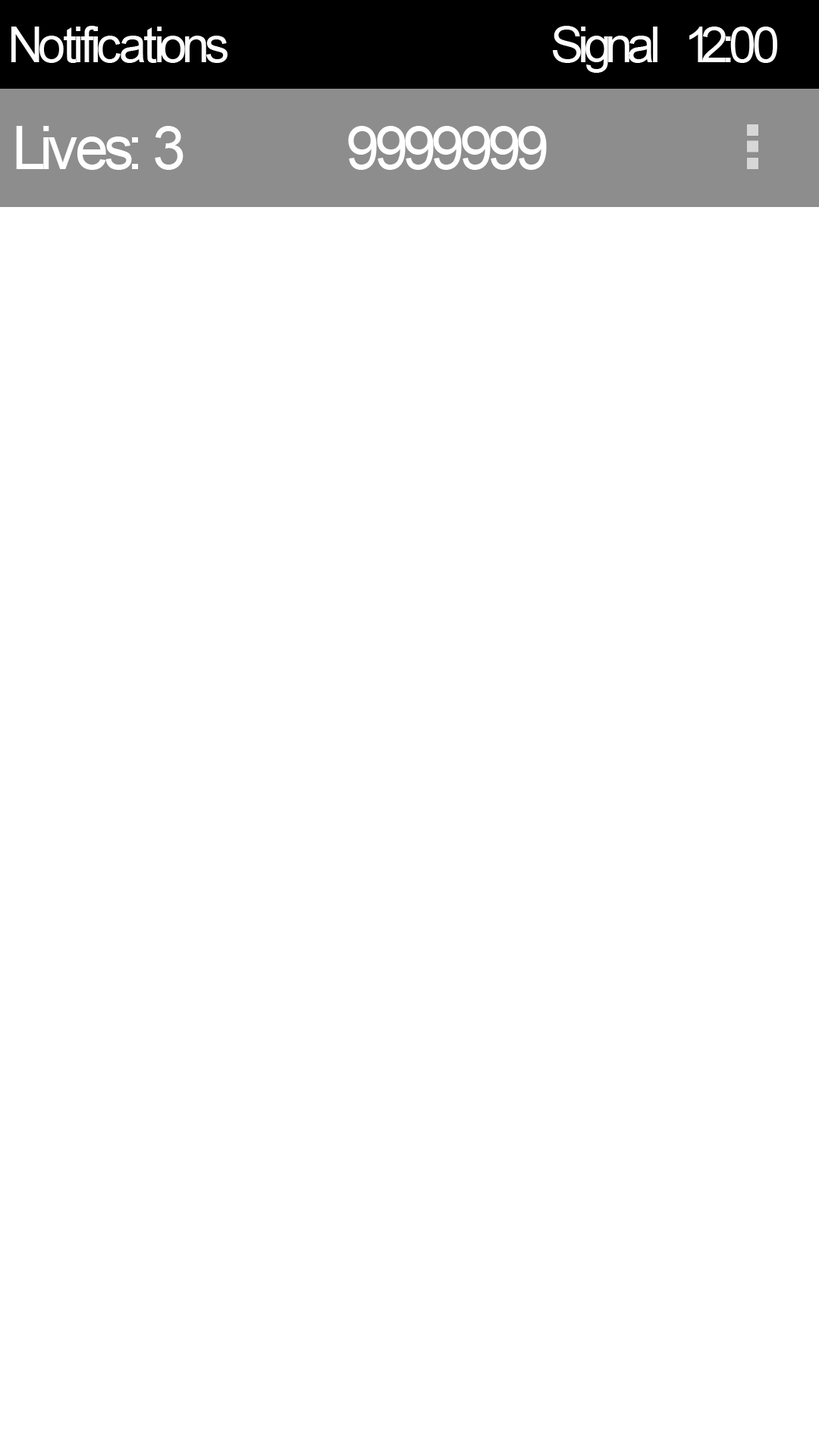
<style>
.page{position:relative;width:819px;height:1456px;background:#ffffff}
.page>*{position:absolute;margin:0}
.t1{font:49.7px "ArialMT";color:#ffffff}
.t2{font:60.3px "ArialMT";color:#ffffff}
</style>
<div class="page">
<p class="t1" style="left:11px;top:26px;width:216px;height:37px">Notifications</p>
<p class="t1" style="left:553px;top:26px;width:104px;height:47px">Signal</p>
<p class="t1" style="left:689px;top:27px;width:88px;height:36px">12:00</p>
<p class="t2" style="left:16px;top:126px;width:168px;height:44px">Lives: 3</p>
<p class="t2" style="left:348px;top:126px;width:199px;height:44px">9999999</p>
</div>
